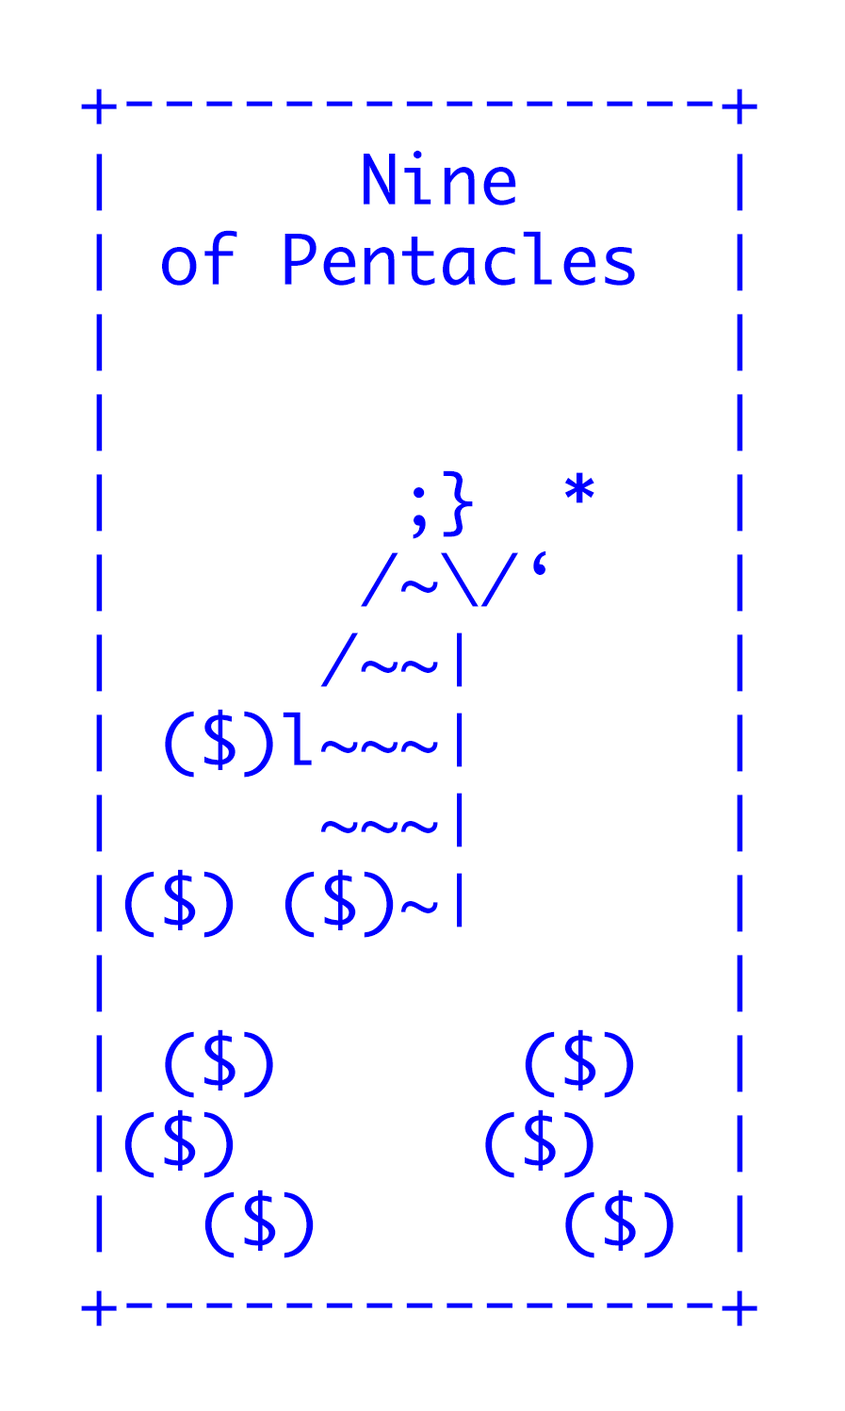
<style>
.page{position:relative;width:845px;height:1411px;background:#ffffff}
.page>*{position:absolute;margin:0}
.t1{font:66.7px "Monaco";color:#0000ff}
</style>
<div class="page">
<p class="t1" style="left:81px;top:89px;width:677px;height:1237px">+---------------+<br>│      Nine     │<br>│ of Pentacles  │<br>│               │<br>│               │<br>│       ;}  *   │<br>│      /~\/‘    │ <br>│     /~~|      │ <br>│ ($)l~~~|      │<br>│     ~~~|      │<br>│($) ($)~|      │ <br>│               │ <br>│ ($)      ($)  │<br>│($)      ($)   │<br>│  ($)      ($) │<br>+---------------+</p>
</div>
